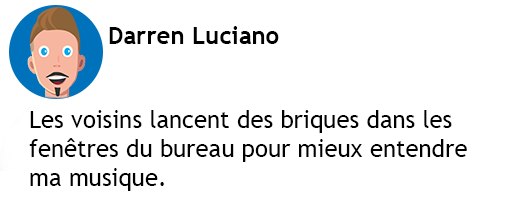
<style>
.page{position:relative;width:512px;height:207px;background:#ffffff}
.page>*{position:absolute;margin:0}
.t1{font:24px "TrebuchetMS-Bold";color:#000000}
.t2{font:24px "TrebuchetMS";color:#000000}
</style>
<div class="page">
<p class="t1" style="left:109px;top:26px;width:170px;height:18px">Darren Luciano</p>
<p class="t2" style="left:29px;top:110px;width:438px;height:81px">Les voisins lancent des briques dans les <br>fenêtres du bureau pour mieux entendre<br>ma musique.</p>
</div>
